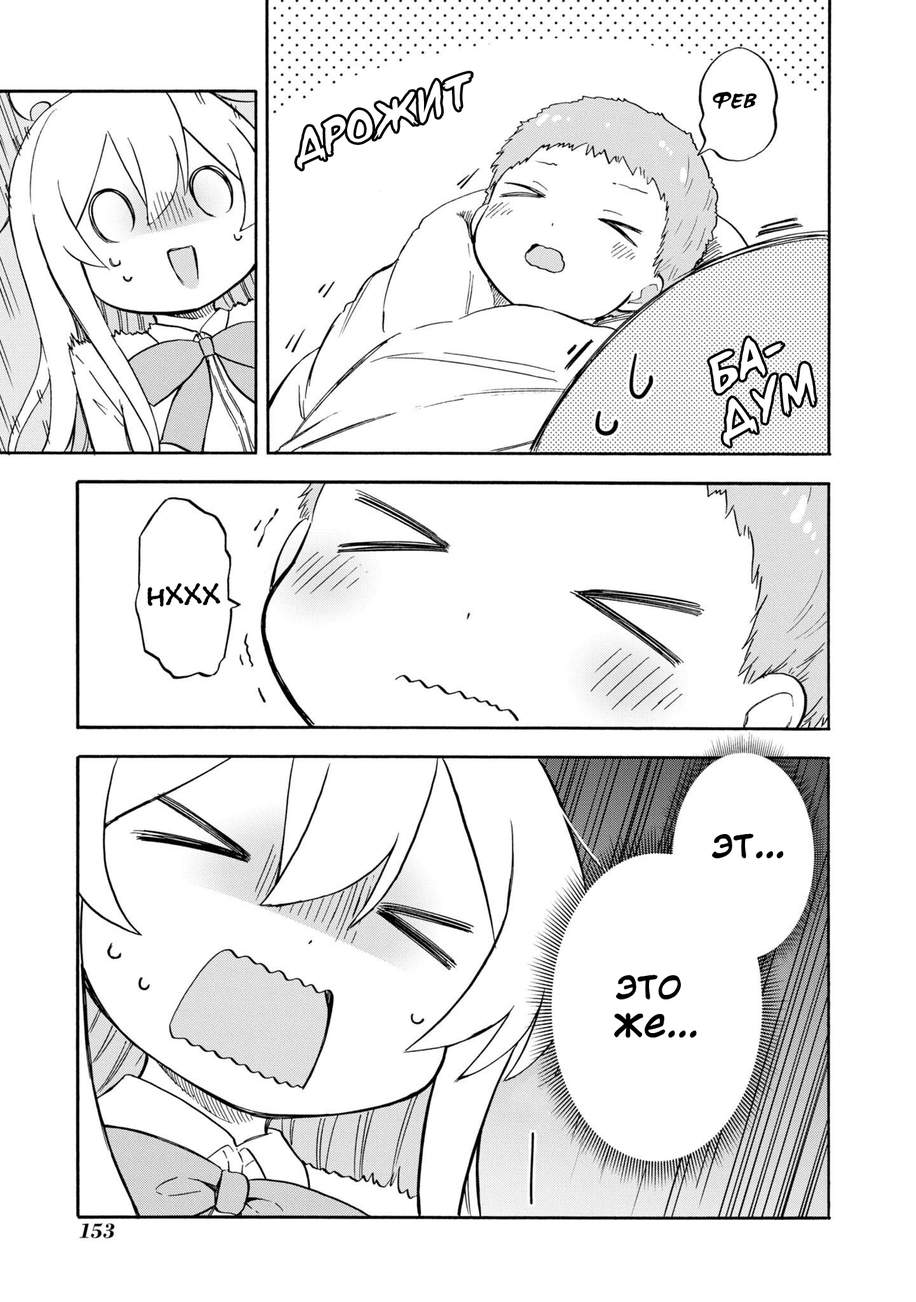
<style>
.page{position:relative;width:916px;height:1302px;background:#ffffff}
.page>*{position:absolute;margin:0}
.t1{font:19.1px "d_CCTimSaleBrush-Italic";color:#000000}
.t2{font:30.5px "el_CCEvilSchemes";color:#000000}
.t3{font:38.1px "KuraiVoice2";color:#000000}
.t4{font:38.1px/38.1px "KuraiVoice2";color:#000000}
</style>
<div class="page">
<p class="t1" style="left:713px;top:92px;width:44px;height:17px">ФЕВ</p>
<p class="t2" style="left:147px;top:583px;width:74px;height:23px">НХХХ</p>
<p class="t3" style="left:712px;top:833px;width:72px;height:25px">эт…</p>
<p class="t4" style="left:614px;top:974px;width:83px;height:63px;text-align:center">это<br> же...</p>
</div>
